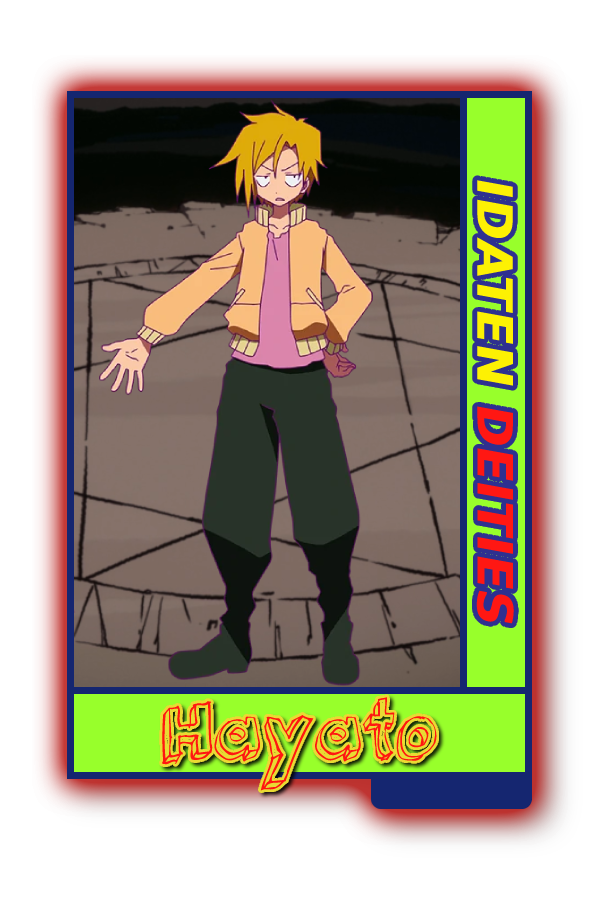
<style>
.page{position:relative;width:600px;height:900px;background:#ffffff}
.page>*{position:absolute;margin:0}
.t1{font:48.8px "MADETOMMY-Bold";color:#ff1713;font-weight:bold;font-style:italic}
.t2{font:48.8px "MADETOMMY-Bold";color:#fdf103;font-weight:bold;font-style:italic}
.t3{font:75px "3dumb";color:#ff1611}
</style>
<div class="page">
<p class="t1" style="left:476px;top:180px;width:38px;height:444px;rotate:90deg"><span class="t2">IDATEN </span>DEITIES</p>
<p class="t3" style="left:162px;top:697px;width:275px;height:94px">Hayato</p>
</div>
